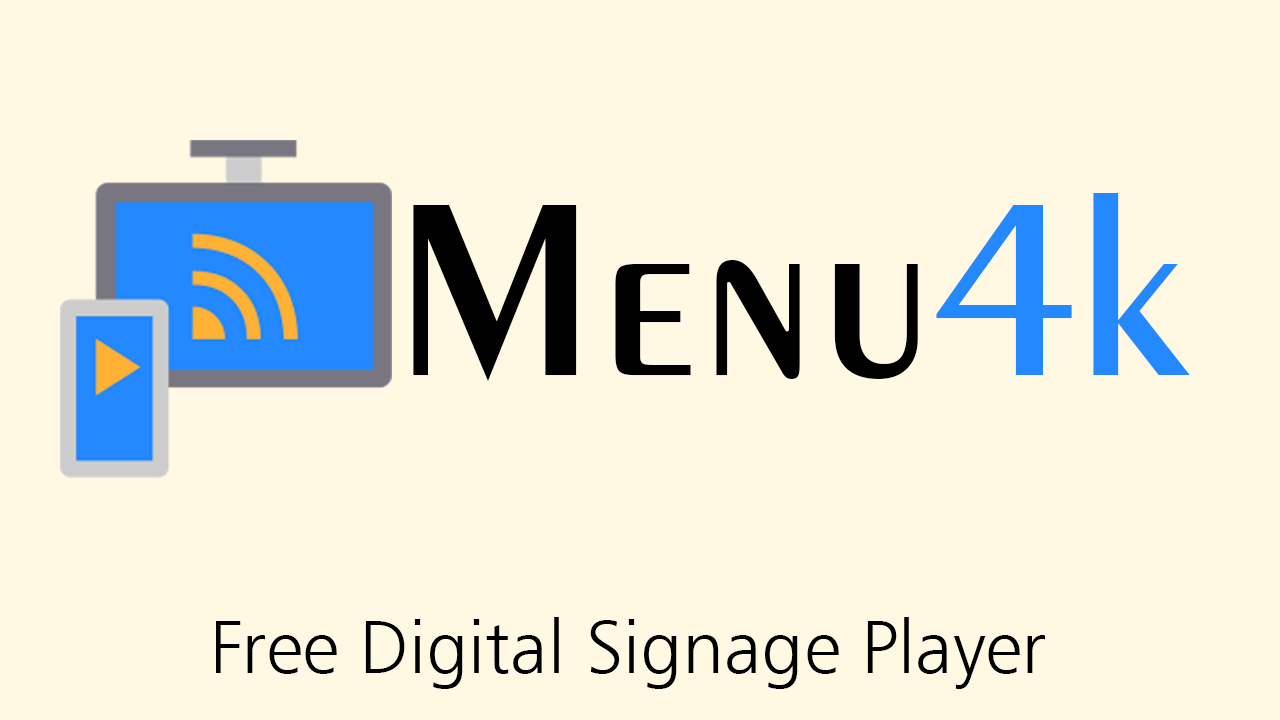
<style>
.page{position:relative;width:1280px;height:720px;background:#fff8e2}
.page>*{position:absolute;margin:0}
.t1{font:260px "Exotic350BT-DemiBold";color:#000000}
.t2{font:260px "Exotic350BT-DemiBold";color:#2488ff}
.t3{font:75px "Humanist777BT-LightB";color:#000000}
</style>
<div class="page">
<p class="t1" style="left:413px;top:193px;width:777px;height:188px">Menu<span class="t2">4k</span></p>
<p class="t3" style="left:216px;top:617px;width:829px;height:72px">Free Digital Signage Player</p>
</div>
